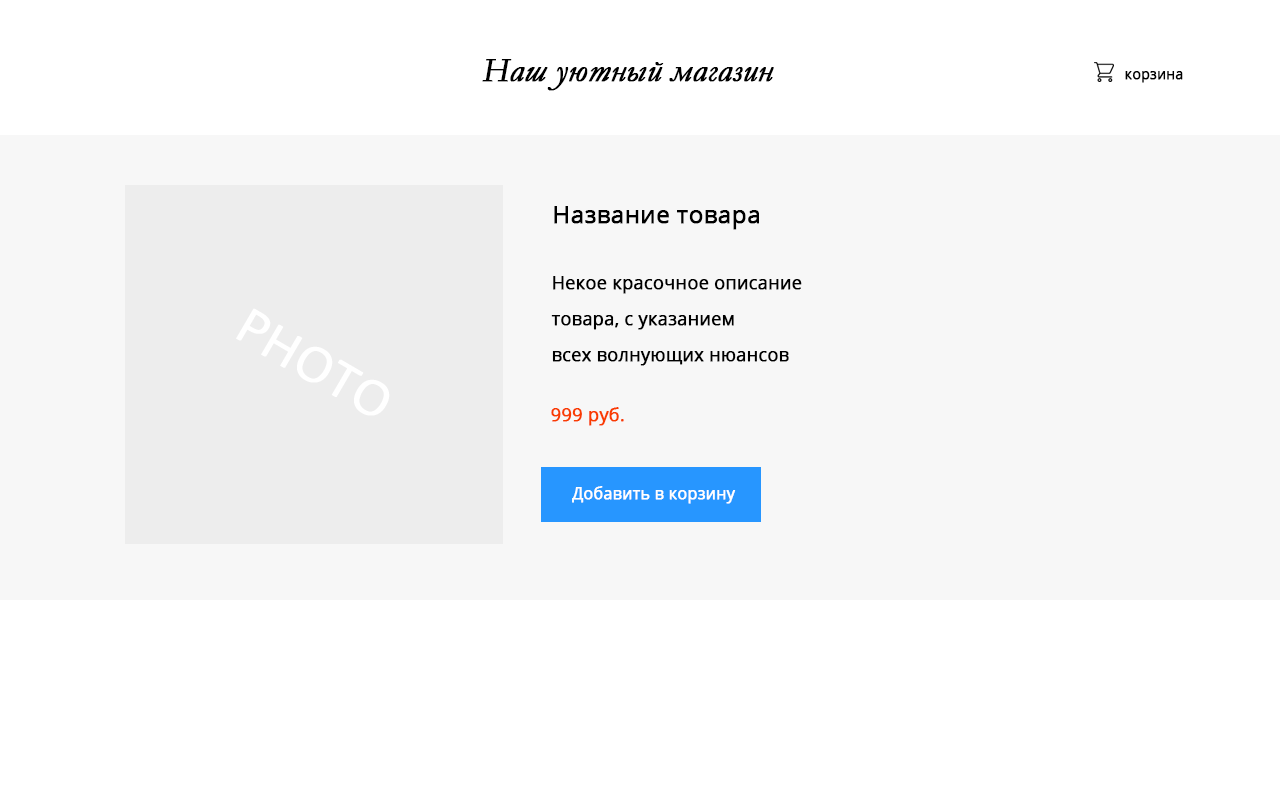
<style>
.page{position:relative;width:1280px;height:800px;background:#f7f7f7}
.page>*{position:absolute;margin:0}
.t1{font:34px "Garamond-Italic";letter-spacing:-0.005em;color:#000000;font-weight:bold}
.t2{font:14px "OpenSans-Regular";letter-spacing:-0.005em;color:#000000;font-weight:bold}
.t3{font:24px "OpenSans-Regular";letter-spacing:-0.005em;color:#000000;font-weight:bold}
.t4{font:18px/36px "OpenSans-Regular";letter-spacing:-0.005em;color:#000000;font-weight:bold}
.t5{font:18px "OpenSans-Regular";letter-spacing:-0.005em;color:#f93c00;font-weight:bold}
.t6{font:16px "OpenSans-Regular";letter-spacing:-0.005em;color:#ffffff;font-weight:bold}
</style>
<div class="page">
<p class="t1" style="left:482px;top:59px;width:292px;height:32px">Наш уютный магазин</p>
<p class="t2" style="left:1125px;top:71px;width:58px;height:12px">корзина</p>
<p class="t3" style="left:554px;top:206px;width:205px;height:24px">Название товара</p>
<p class="t4" style="left:551px;top:276px;width:251px;height:90px">Некое красочное описание <br>товара, с указанием<br>всех волнующих нюансов</p>
<p class="t5" style="left:551px;top:407px;width:73px;height:19px">999 руб.</p>
<p class="t6" style="left:572px;top:486px;width:164px;height:18px">Добавить в корзину</p>
</div>
